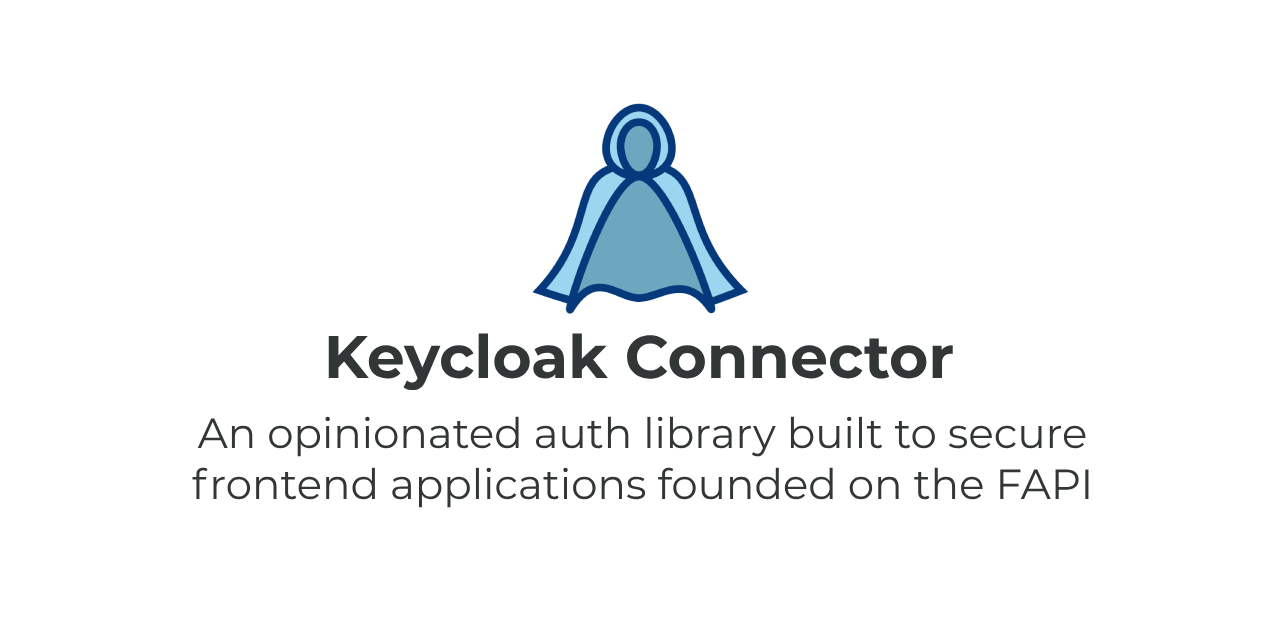
<style>
.page{position:relative;width:1280px;height:640px;background:#ffffff}
.page>*{position:absolute;margin:0}
.t1{font:60px "Montserrat-Bold";color:#323637}
.t2{font:42px "Montserrat-Regular";color:#323637}
</style>
<div class="page">
<p class="t1" style="left:328px;top:333px;width:625px;height:58px">Keycloak Connector</p>
<p class="t2" style="left:192px;top:416px;width:897px;height:92px;text-align:center">An opinionated auth library built to secure frontend applications founded on the FAPI</p>
</div>
